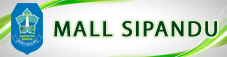
<style>
.page{position:relative;width:227px;height:57px}
.page>*{position:absolute;margin:0}
.t1{font:22px "MyriadPro-Regular";letter-spacing:0.08em;color:#004014;font-weight:bold}
</style>
<div class="page">
<p class="t1" style="left:54px;top:21px;width:163px;height:16px">MALL SIPANDU</p>
</div>
